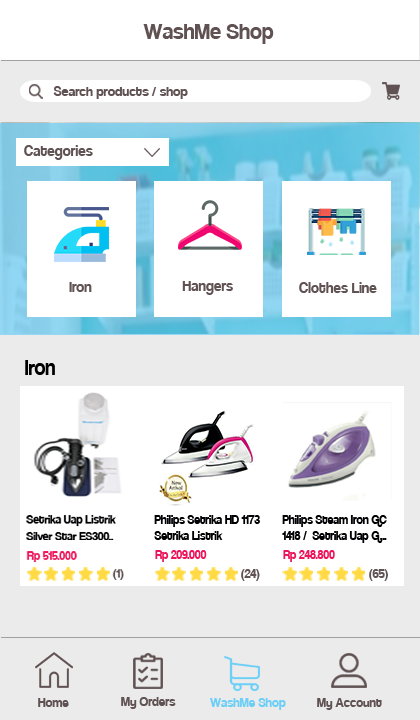
<style>
.page{position:relative;width:420px;height:720px;background:#ffffff}
.page>*{position:absolute;margin:0}
.t1{font:24px "Coolvetica-Regular";color:#605252}
.t2{font:14.7px "Coolvetica-Regular";color:#605252}
.t3{font:17.1px "Coolvetica-Regular";color:#605252;scale:0.95 1}
.t4{font:24px "Coolvetica-Regular";color:#000000;scale:0.92 1}
.t5{font:13.6px "Coolvetica-Regular";color:#000003;scale:0.93 1}
.t6{font:13.6px "Coolvetica-Regular";color:#ed145b;scale:0.93 1}
.t7{font:13.6px "Coolvetica-Regular";color:#605252}
.t8{font:14px "Coolvetica-Regular";color:#605252}
.t9{font:14px "Coolvetica-Regular";color:#6dcff6}
</style>
<div class="page">
<p class="t1" style="left:143px;top:24px;width:131px;height:20px">WashMe Shop</p>
<p class="t2" style="left:53px;top:86px;width:135px;height:13px">Search products / shop</p>
<p class="t3" style="left:24px;top:145px;width:69px;height:15px">Categories</p>
<p class="t3" style="left:182px;top:281px;width:51px;height:14px">Hangers</p>
<p class="t3" style="left:69px;top:282px;width:23px;height:10px">Iron</p>
<p class="t3" style="left:299px;top:282px;width:78px;height:11px">Clothes Line</p>
<p class="t4" style="left:25px;top:360px;width:30px;height:15px">Iron</p>
<p class="t5" style="left:26px;top:515px;width:90px;height:25px">Setrika Uap Listrik<br>Silver Star ES300..</p>
<p class="t5" style="left:154px;top:515px;width:106px;height:25px">Philips Setrika HD 1173<br>Setrika Listrik</p>
<p class="t5" style="left:282px;top:515px;width:105px;height:28px">Philips Steam Iron GC<br>1418 /  Setrika Uap G...</p>
<p class="t6" style="left:26px;top:551px;width:51px;height:11px">Rp 515.000</p>
<p class="t6" style="left:155px;top:550px;width:52px;height:12px">Rp 209.000</p>
<p class="t6" style="left:283px;top:550px;width:52px;height:12px">Rp 248.800</p>
<p class="t7" style="left:112px;top:569px;width:12px;height:11px">(1)</p>
<p class="t7" style="left:241px;top:569px;width:19px;height:12px">(24)</p>
<p class="t7" style="left:369px;top:569px;width:19px;height:12px">(65)</p>
<p class="t8" style="left:38px;top:698px;width:31px;height:9px">Home</p>
<p class="t8" style="left:121px;top:697px;width:55px;height:12px">My Orders</p>
<p class="t9" style="left:210px;top:698px;width:76px;height:12px">WashMe Shop</p>
<p class="t8" style="left:317px;top:698px;width:65px;height:12px">My Account</p>
</div>
